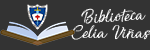
<style>
.page{position:relative;width:150px;height:50px;background:#333333}
.page>*{position:absolute;margin:0}
.t1{font:24px "Sensations-and-Qualities";color:#ffffff;scale:1.1 1}
</style>
<div class="page">
<p class="t1" style="left:81px;top:8px;width:65px;height:16px;rotate:-3deg">Biblioteca</p>
<p class="t1" style="left:71px;top:25px;width:80px;height:15px">Celia Viñas</p>
</div>
